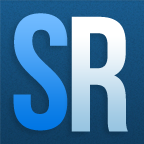
<style>
.page{position:relative;width:144px;height:144px}
.page>*{position:absolute;margin:0}
.t1{font:163.4px "BebasNeue";letter-spacing:-0.025em}
</style>
<div class="page">
<p class="t1" style="left:13px;top:13px;width:55px;height:118px">s</p>
<p class="t1" style="left:71px;top:16px;width:57px;height:116px">r</p>
</div>
